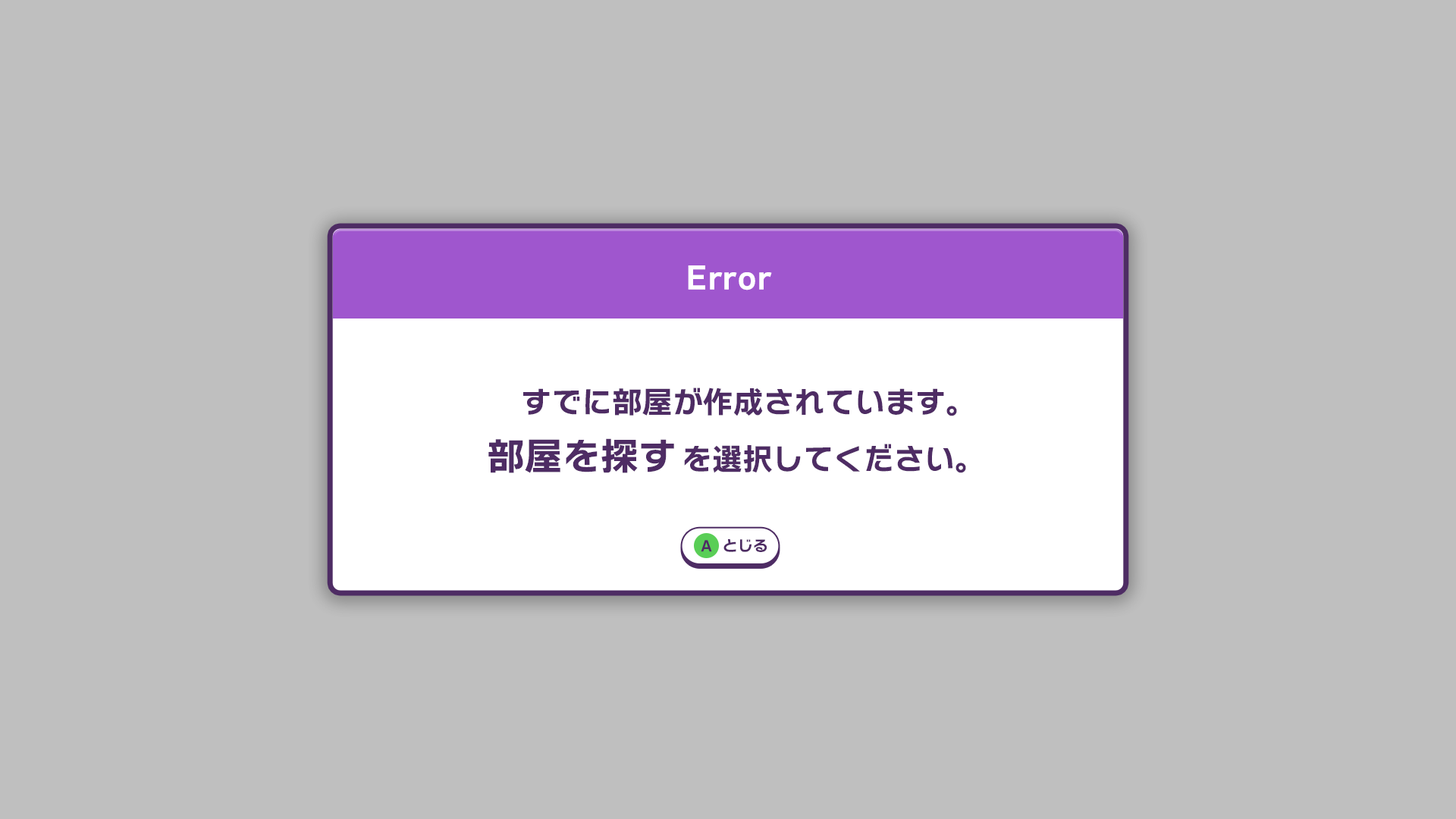
<style>
.page{position:relative;width:1456px;height:819px;background:#bfbfbf}
.page>*{position:absolute;margin:0}
.t1{font:30.3px "NitalagoRuika-06";color:#ffffff}
.t2{font:30.3px "NitalagoRuika-06";color:#4e2c64}
.t3{font:37.9px "NitalagoRuika-06";color:#4e2c64}
.t4{font:14.5px "NitalagoRuika-06";color:#4e2c64}
.t5{font:15.3px "NitalagoRuika-06";color:#4e2c64}
</style>
<div class="page">
<p class="t1" style="left:688px;top:265px;width:84px;height:25px">Error</p>
<p class="t2" style="left:523px;top:388px;width:434px;height:28px">すでに部屋が作成されています。</p>
<p class="t3" style="left:488px;top:438px;width:186px;height:35px">部屋を探す</p>
<p class="t2" style="left:684px;top:444px;width:282px;height:29px">を選択してください。</p>
<p class="t4" style="left:701px;top:540px;width:11px;height:12px">A</p>
<p class="t5" style="left:723px;top:539px;width:44px;height:13px">とじる</p>
</div>
